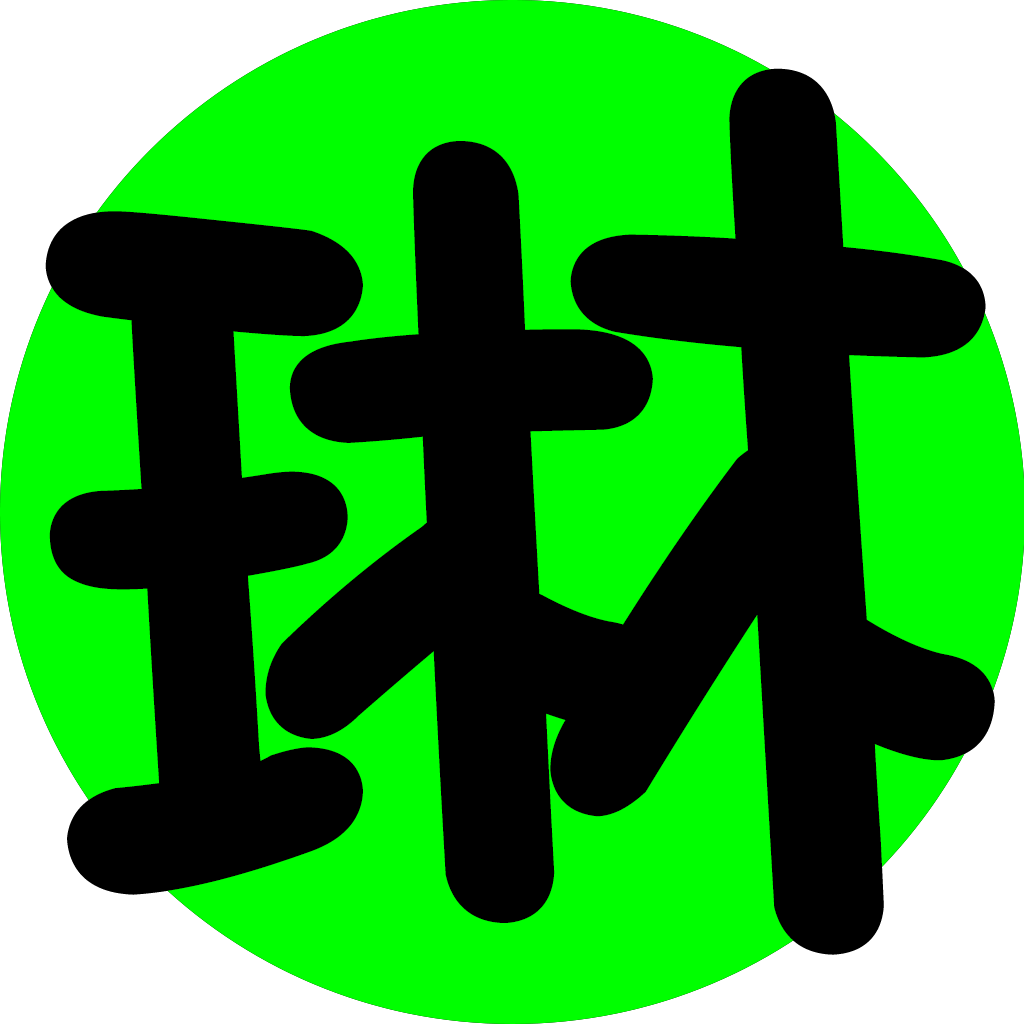
<style>
.page{position:relative;width:1024px;height:1024px;background:#000000}
.page>*{position:absolute;margin:0}
.t1{font:1041.7px "DFGirl-W5-WIN-BF";color:#000000;font-weight:bold}
</style>
<div class="page">
<p class="t1" style="left:45px;top:68px;width:950px;height:887px">琳</p>
</div>
